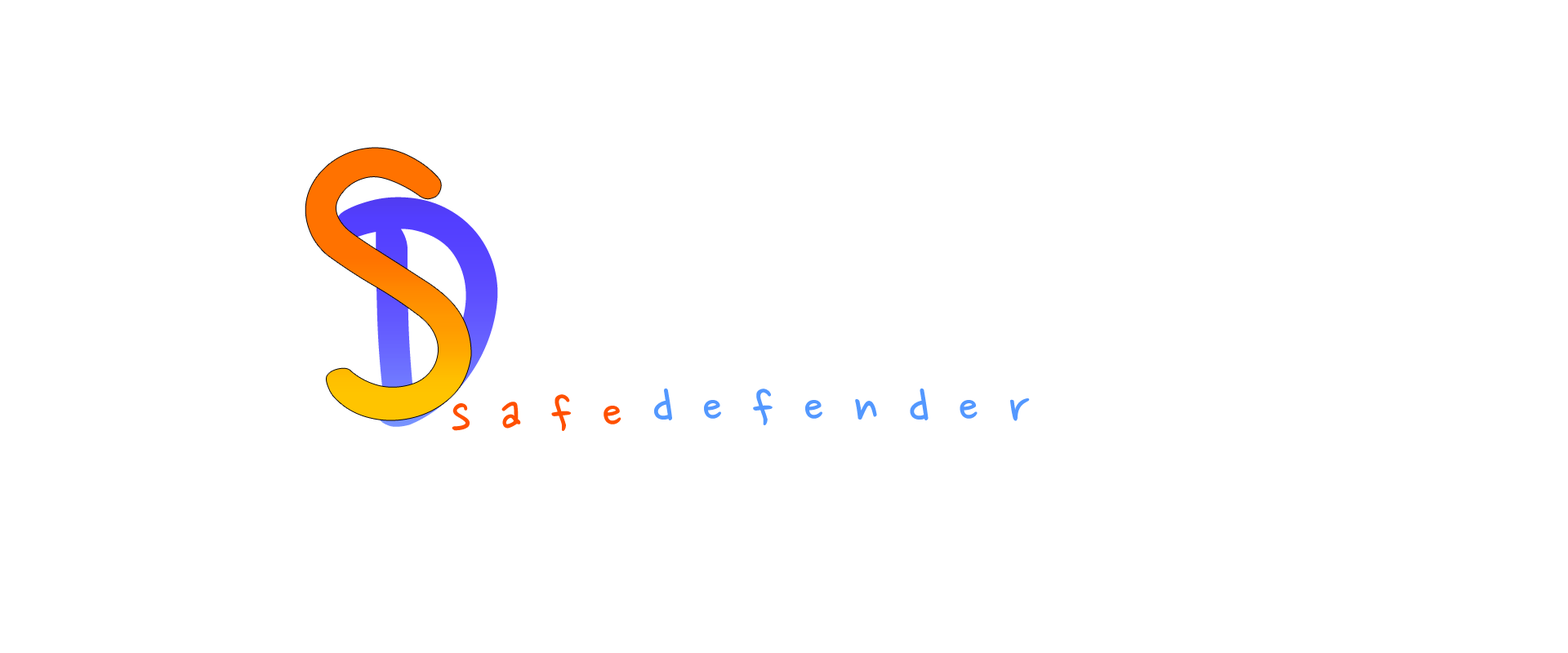
<style>
.page{position:relative;width:1568px;height:653px;background:#ffffff}
.page>*{position:absolute;margin:0}
.t1{font:58.8px "NanumPen";letter-spacing:0.5em;color:#5398ff}
.t2{font:58.8px "NanumPen";letter-spacing:0.5em;color:#ff5000}
</style>
<div class="page">
<p class="t1" style="left:654px;top:388px;width:376px;height:37px">defender</p>
<p class="t2" style="left:452px;top:394px;width:169px;height:37px">safe</p>
</div>
